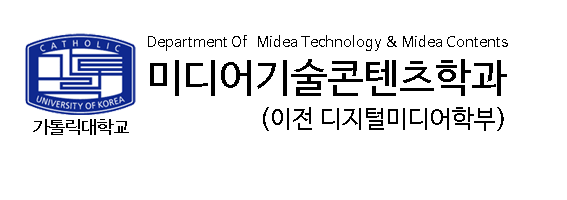
<style>
.page{position:relative;width:567px;height:200px;background:#ffffff}
.page>*{position:absolute;margin:0}
.t1{font:15px "NanumBarunGothic";color:#000000}
.t2{font:40px "NanumBarunGothic";color:#000000}
.t3{font:25px "NanumBarunGothic";color:#000000}
.t4{font:18px "NanumBarunGothic";color:#000000}
</style>
<div class="page">
<p class="t1" style="left:148px;top:35px;width:360px;height:16px">Department Of   Midea Technology &amp; Midea Contents</p>
<p class="t2" style="left:150px;top:59px;width:357px;height:37px">미디어기술콘텐츠학과</p>
<p class="t3" style="left:263px;top:107px;width:241px;height:24px">(이전 디지털미디어학부)</p>
<p class="t4" style="left:33px;top:119px;width:96px;height:16px">가톨릭대학교</p>
</div>
